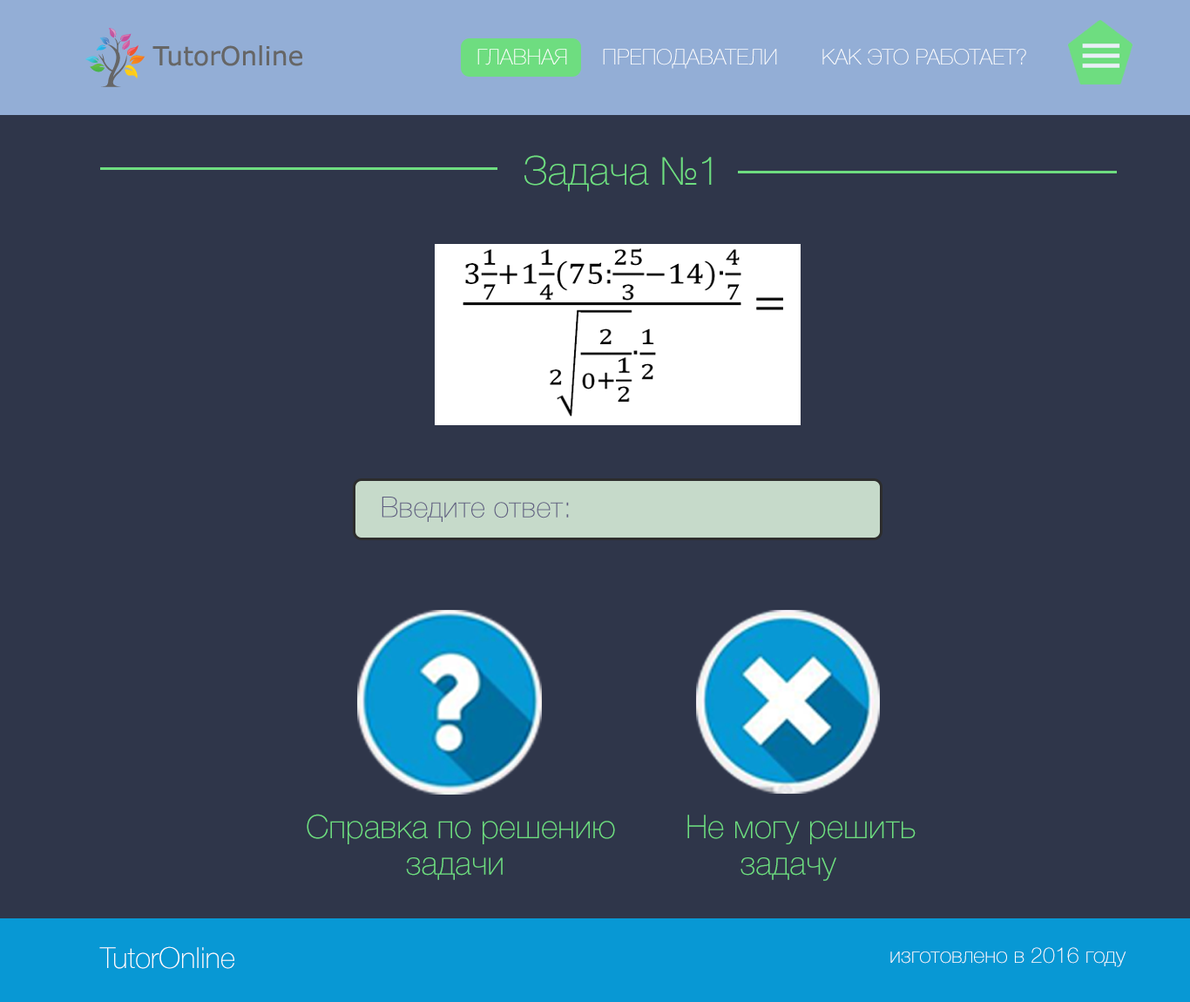
<style>
.page{position:relative;width:1190px;height:1002px;background:#2f364a}
.page>*{position:absolute;margin:0}
.t1{font:21.8px "HelveticaNeueCyr-Thin";color:#ffffff}
.t2{font:39.9px "HelveticaNeueCyr-Thin";color:#6edd80}
.t3{font:29px "HelveticaNeueCyr-Thin";color:#605f81}
.t4{font:32.7px/36.3px "HelveticaNeueCyr-Thin";color:#6edd80}
.t5{font:29px "HelveticaNeueCyr-Thin";color:#fcffff}
.t6{font:21.8px "HelveticaNeueCyr-Thin";color:#fcffff}
</style>
<div class="page">
<p class="t1" style="left:477px;top:49px;width:549px;height:20px">ГЛАВНАЯ  ПРЕПОДАВАТЕЛИ  КАК ЭТО РАБОТАЕТ?</p>
<p class="t2" style="left:524px;top:155px;width:188px;height:37px">Задача №1</p>
<p class="t3" style="left:382px;top:497px;width:187px;height:25px">Введите ответ:</p>
<p class="t4" style="left:307px;top:814px;width:308px;height:66px">Справка по решению <br>           задачи</p>
<p class="t4" style="left:687px;top:815px;width:229px;height:66px">Не могу решить <br>      задачу</p>
<p class="t5" style="left:99px;top:946px;width:135px;height:23px">TutorOnline</p>
<p class="t6" style="left:890px;top:947px;width:237px;height:20px">изготовлено в 2016 году</p>
</div>
